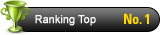
<style>
.page{position:relative;width:160px;height:35px;background:#ffffff}
.page>*{position:absolute;margin:0}
.t1{font:11px "ArialMT";letter-spacing:-0.025em;color:#ffffff;font-weight:bold}
.t2{font:14px "Univeconbol";letter-spacing:-0.025em;color:#ffd800}
</style>
<div class="page">
<p class="t1" style="left:35px;top:15px;width:61px;height:11px">Ranking Top</p>
<p class="t2" style="left:124px;top:13px;width:25px;height:11px">No. 1</p>
</div>
